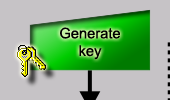
<style>
.page{position:relative;width:170px;height:100px;background:#c6c3c6}
.page>*{position:absolute;margin:0}
.t1{font:14.7px "ArialMT";color:#000000}
</style>
<div class="page">
<p class="t1" style="left:60px;top:27px;width:60px;height:33px;text-align:center">Generate<br>key</p>
</div>
